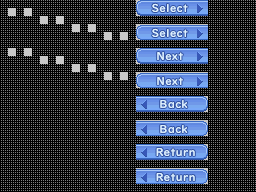
<style>
.page{position:relative;width:256px;height:192px;background:#000000}
.page>*{position:absolute;margin:0}
.t1{font:10.7px/24px "UDDigiKyokashoNK-Bold";letter-spacing:0.05em;color:#e2eeff}
.t2{font:10.7px/23.3px "UDDigiKyokashoNK-Bold";letter-spacing:0.05em;color:#e2eeff}
</style>
<div class="page">
<p class="t1" style="left:152px;top:3px;width:43px;height:178px;text-align:center"><span class="t2">Select<br></span>Select<br>Next<br>Next<br>   Back<br>   Back<br>    Return<br>    Return</p>
</div>
